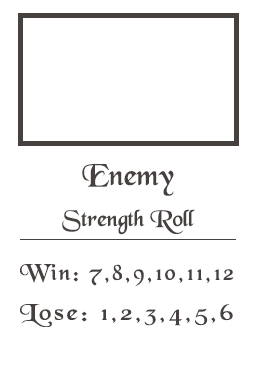
<style>
.page{position:relative;width:256px;height:384px;background:#ffffff}
.page>*{position:absolute;margin:0}
.t1{font:32px "BlackChancery";color:#46403f}
.t2{font:24px "BlackChancery";color:#46403f}
.t3{font:24px "BlackChancery";letter-spacing:0.1em;color:#46403f}
.t4{font:24px "BlackChancery";letter-spacing:0.1em;color:#46403f;scale:1.17 1}
</style>
<div class="page">
<p class="t1" style="left:82px;top:163px;width:92px;height:33px">Enemy</p>
<p class="t2" style="left:62px;top:209px;width:133px;height:26px">Strength Roll</p>
<p class="t3" style="left:20px;top:264px;width:214px;height:23px">Win: 7,8,9,10,11,12</p>
<p class="t4" style="left:20px;top:304px;width:213px;height:23px">Lose: 1,2,3,4,5,6</p>
</div>
